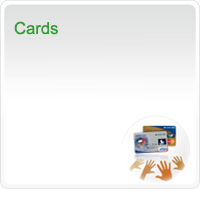
<style>
.page{position:relative;width:200px;height:200px;background:#ffffff}
.page>*{position:absolute;margin:0}
.t1{font:16.7px "ArialMT";color:#369a36}
</style>
<div class="page">
<p class="t1" style="left:14px;top:21px;width:44px;height:14px">Cards</p>
</div>
